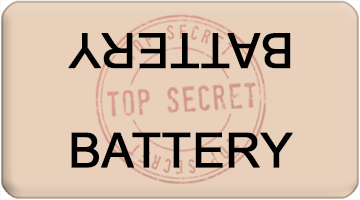
<style>
.page{position:relative;width:360px;height:200px;background:#e8d0bb}
.page>*{position:absolute;margin:0}
.t1{font:48px "ArialMT";color:#000000;font-weight:bold}
</style>
<div class="page">
<p class="t1" style="left:68px;top:33px;width:223px;height:36px;rotate:180deg">BATTERY</p>
<p class="t1" style="left:71px;top:132px;width:222px;height:36px">BATTERY</p>
</div>
